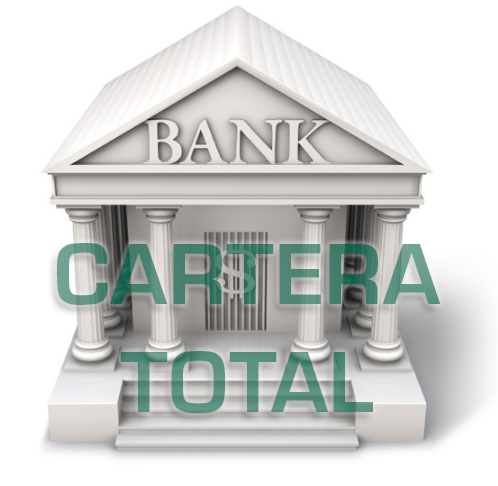
<style>
.page{position:relative;width:498px;height:486px;background:#ffffff}
.page>*{position:absolute;margin:0}
.t1{font:90px "Eurostile-Bol";color:#508776}
</style>
<div class="page">
<p class="t1" style="left:57px;top:243px;width:384px;height:170px;text-align:center">CARTERA<br>TOTAL</p>
</div>
